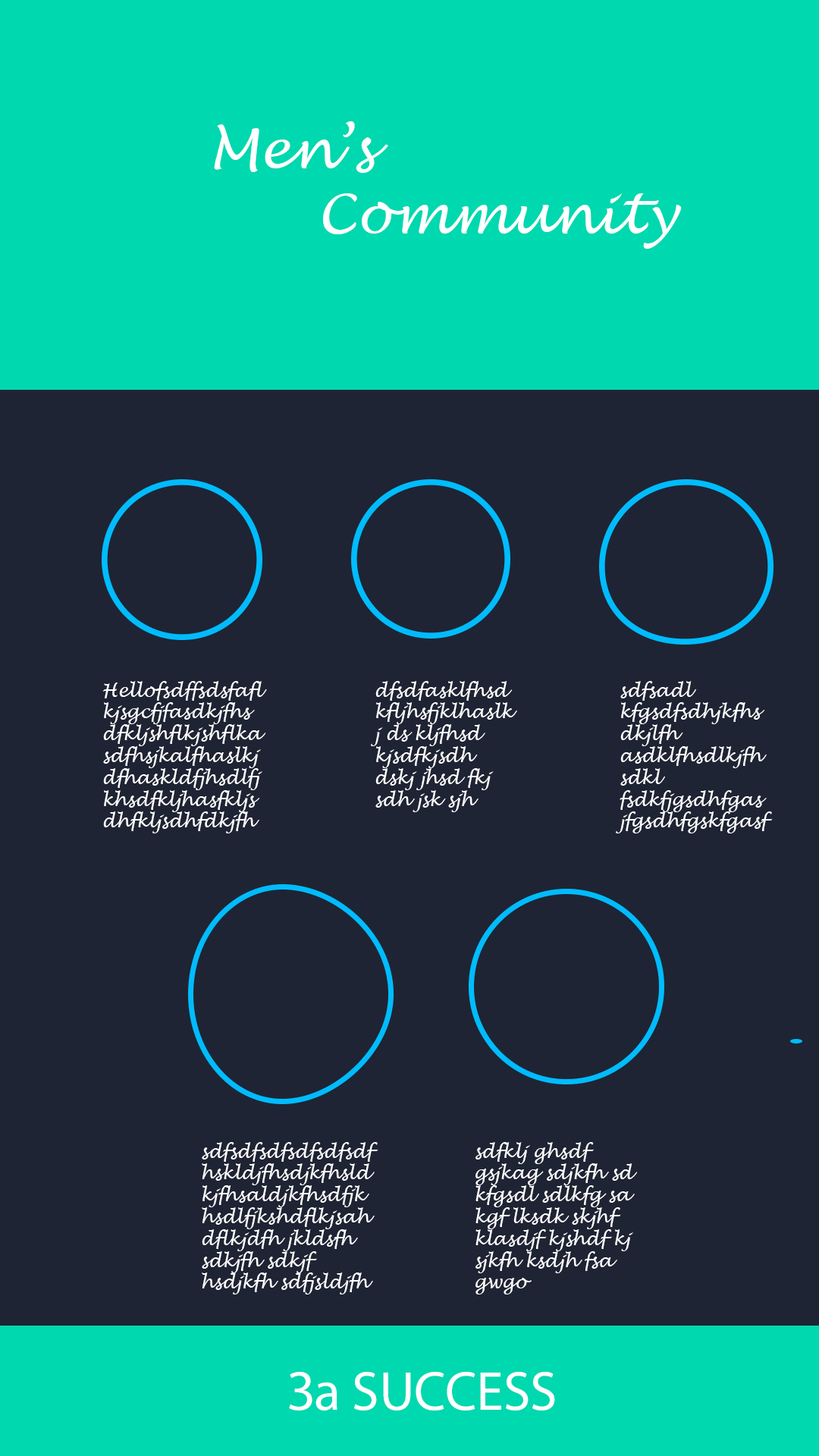
<style>
.page{position:relative;width:819px;height:1456px;background:#1e2434}
.page>*{position:absolute;margin:0}
.t1{font:54.6px "LucidaHandwriting-Italic";color:#ffffff}
.t2{font:18.2px "LucidaHandwriting-Italic";color:#ffffff}
.t3{font:54.6px "MyriadPro-Regular";color:#ffffff}
</style>
<div class="page">
<p class="t1" style="left:214px;top:121px;width:468px;height:128px">Men’s<br>    Community<br>nity</p>
<p class="t2" style="left:102px;top:681px;width:165px;height:152px">Hellofsdffsdsfaflkjsgcfjfasdkjfhsdfkljshflkjshflkasdfhsjkalfhaslkjdfhaskldfjhsdlfjkhsdfkljhasfkljsdhfkljsdhfdkjfh</p>
<p class="t2" style="left:371px;top:681px;width:146px;height:131px">dfsdfasklfhsdkfljhsfjklhaslkj ds kljfhsd kjsdfkjsdh dskj jhsd fkj sdh jsk sjh  sdjk</p>
<p class="t2" style="left:616px;top:681px;width:157px;height:152px">sdfsadl kfgsdfsdhjkfhsdkjlfh asdklfhsdlkjfh sdkl fsdkfjgsdhfgas jfgsdhfgskfgasf</p>
<p class="t2" style="left:202px;top:1142px;width:176px;height:152px">sdfsdfsdfsdfsdfsdfhskldjfhsdjkfhsldkjfhsaldjkfhsdfjkhsdlfjkshdflkjsahdflkjdfh jkldsfh sdkjfh sdkjf hsdjkfh sdfjsldjfh</p>
<p class="t2" style="left:475px;top:1142px;width:163px;height:152px">sdfklj ghsdf gsjkag sdjkfh sd kfgsdl sdlkfg sa kgf lksdk skjhf  klasdjf kjshdf kj sjkfh ksdjh fsa gwgo iwufgpqwui</p>
<p class="t3" style="left:289px;top:1372px;width:266px;height:38px">За SUCCESS</p>
</div>
